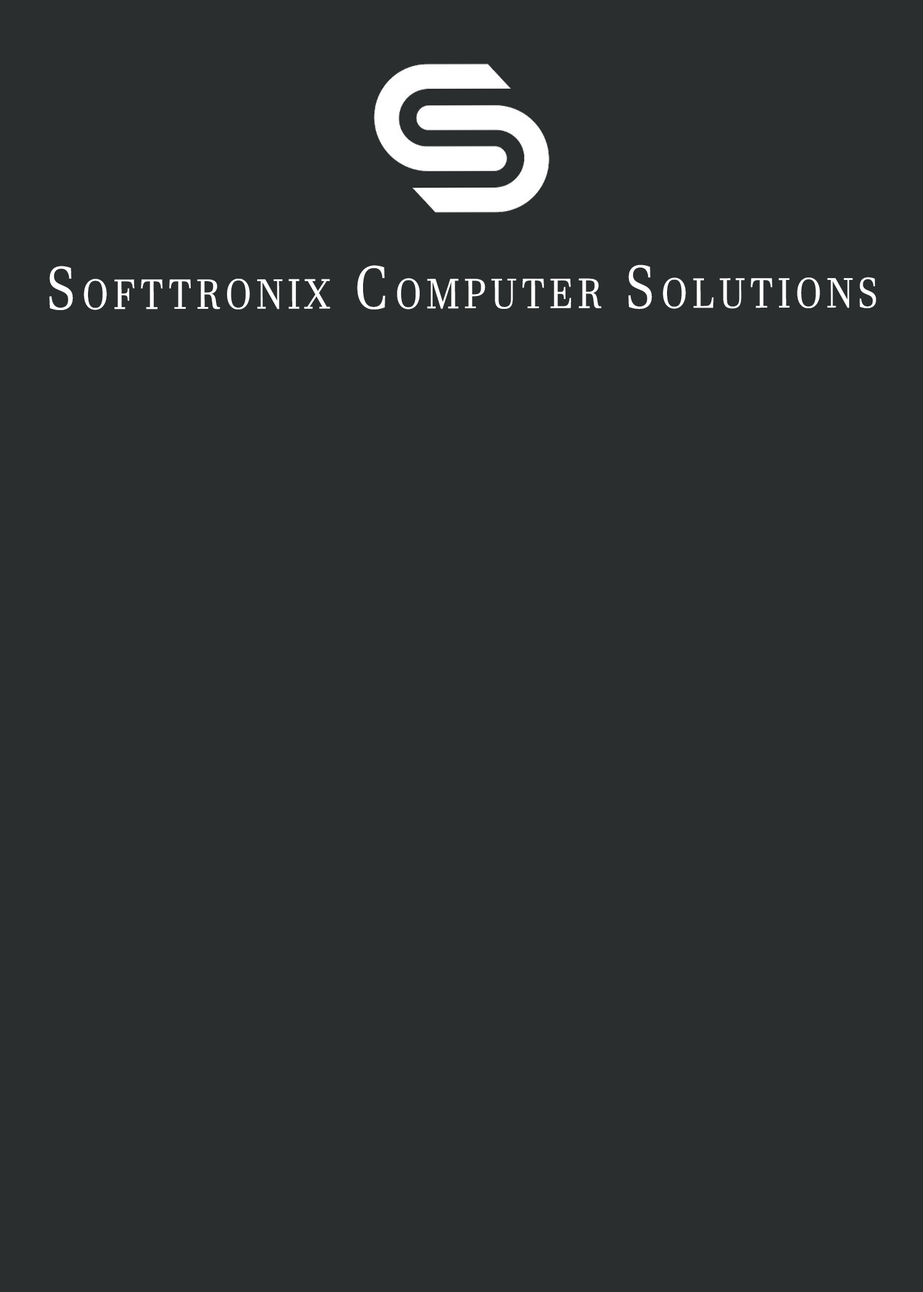
<style>
.page{position:relative;width:923px;height:1292px;background:#2b2e2e}
.page>*{position:absolute;margin:0}
.t1{font:59px "JavaneseText";letter-spacing:0.1em;color:#ffffff;font-variant:small-caps;font-weight:bold;scale:0.86 1}
</style>
<div class="page">
<p class="t1" style="left:49px;top:265px;width:827px;height:45px">Softtronix Computer Solutions</p>
</div>
